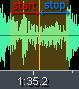
<style>
.page{position:relative;width:79px;height:89px;background:#4f3e10}
.page>*{position:absolute;margin:0}
.t1{font:11px "Verdana";color:#ff0000;scale:0.9 1}
.t2{font:11px "Verdana";color:#0080ff;scale:0.9 1}
</style>
<div class="page">
<p class="t1" style="left:13px;top:1px;width:23px;height:9px">start</p>
<p class="t2" style="left:44px;top:0px;width:22px;height:11px">stop</p>
</div>
